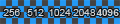
<style>
.page{position:relative;width:120px;height:24px}
.page>*{position:absolute;margin:0}
.t1{font:10px "ArialMT";color:#d2d2d2}
.t2{font:10px "Arial-BoldMT";color:#d2d2d2}
</style>
<div class="page">
<p class="t1" style="left:3px;top:9px;width:17px;height:7px">256</p>
<p class="t1" style="left:27px;top:9px;width:17px;height:7px">512</p>
<p class="t1" style="left:49px;top:9px;width:22px;height:7px">1024</p>
<p class="t1" style="left:73px;top:9px;width:23px;height:7px">2048</p>
<p class="t2" style="left:96px;top:9px;width:23px;height:7px">4096</p>
</div>
